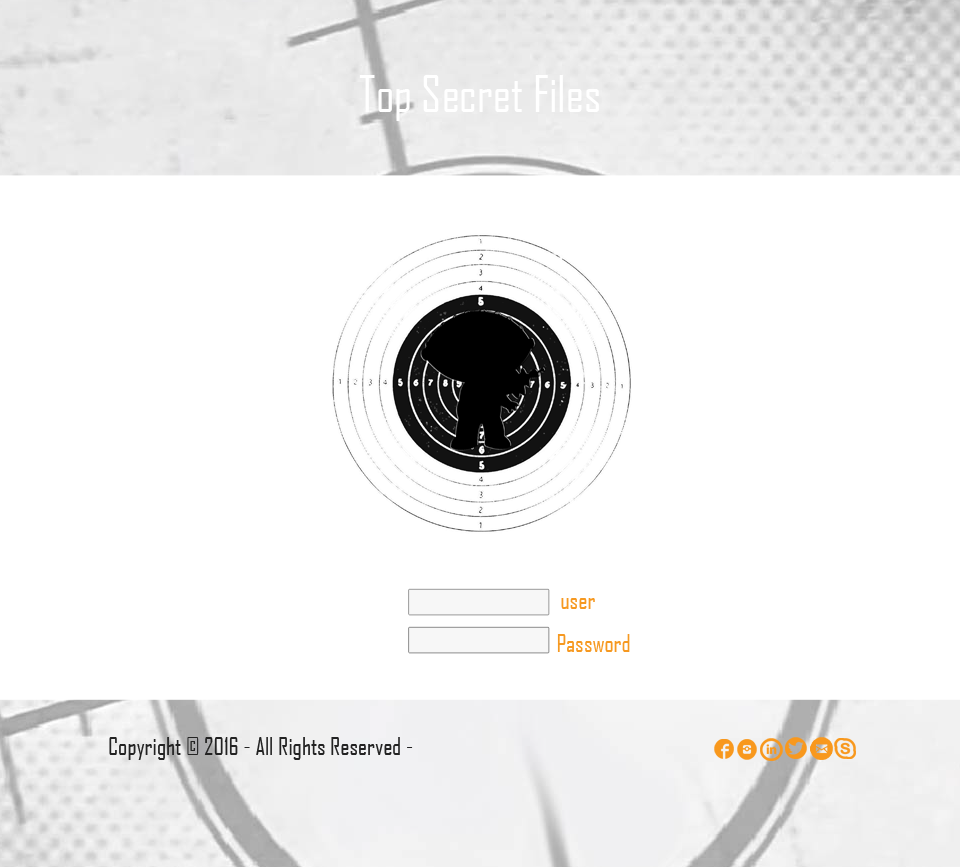
<style>
.page{position:relative;width:960px;height:867px;background:#ffffff}
.page>*{position:absolute;margin:0}
.t1{font:48px "AgencyFB-Reg";color:#ffffff}
.t2{font:24px "AgencyFB-Reg";color:#f69921}
.t3{font:24px "AgencyFB-Reg";color:#232323}
</style>
<div class="page">
<p class="t1" style="left:359px;top:75px;width:240px;height:46px">Top Secret Files</p>
<p class="t2" style="left:561px;top:598px;width:34px;height:11px">user</p>
<p class="t2" style="left:557px;top:634px;width:73px;height:18px">Password</p>
<p class="t3" style="left:109px;top:737px;width:304px;height:23px">Copyright © 2016 - All Rights Reserved -</p>
</div>
